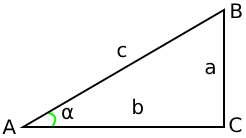
<style>
.page{position:relative;width:246px;height:138px;background:#ffffff}
.page>*{position:absolute;margin:0}
.t1{font:20px "DejaVuSans";color:#000000}
</style>
<div class="page">
<p class="t1" style="left:231px;top:3px;width:11px;height:15px">B</p>
<p class="t1" style="left:117px;top:45px;width:10px;height:13px">c</p>
<p class="t1" style="left:205px;top:62px;width:10px;height:13px">a</p>
<p class="t1" style="left:133px;top:98px;width:10px;height:17px">b</p>
<p class="t1" style="left:62px;top:107px;width:12px;height:13px">α</p>
<p class="t1" style="left:2px;top:119px;width:14px;height:15px">A</p>
<p class="t1" style="left:229px;top:117px;width:13px;height:16px">C</p>
</div>
